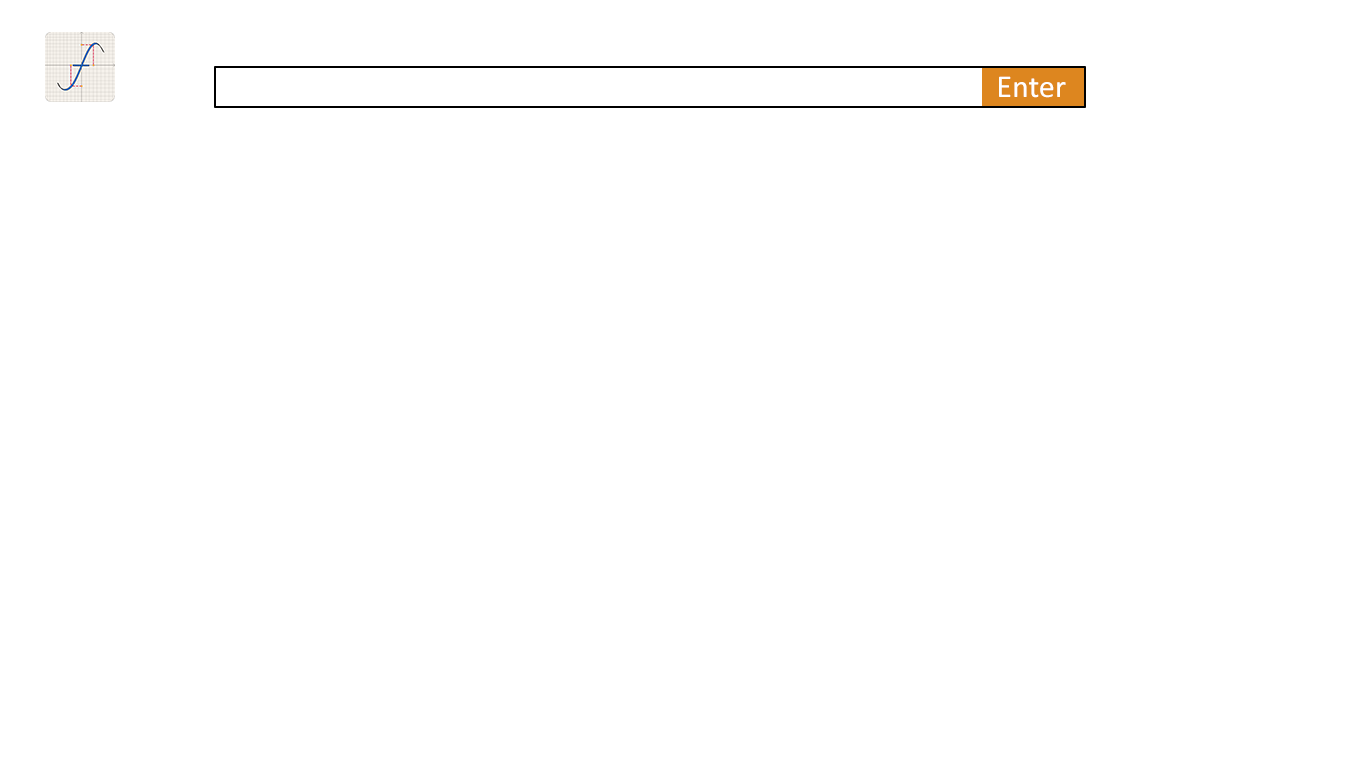
<style>
.page{position:relative;width:1366px;height:768px;background:#ffffff}
.page>*{position:absolute;margin:0}
.t1{font:31.9px "Calibri";color:#ffffff}
</style>
<div class="page">
<p class="t1" style="left:999px;top:76px;width:67px;height:22px">Enter</p>
</div>
